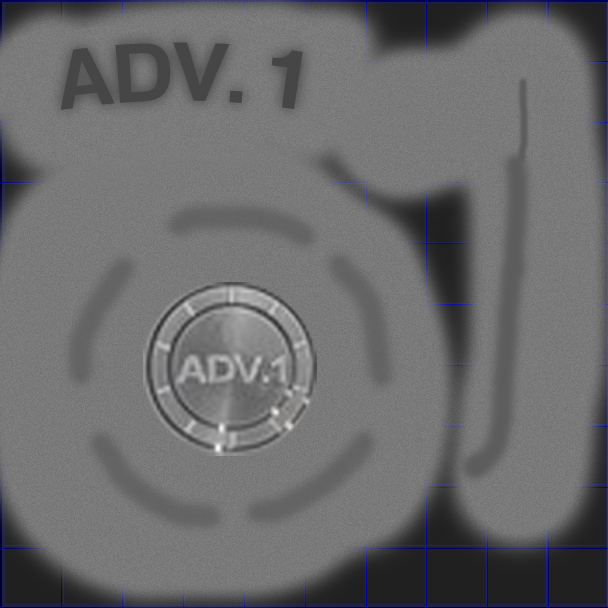
<style>
.page{position:relative;width:608px;height:608px}
.page>*{position:absolute;margin:0}
.t1{font:80.8px "HeldustryFTVBasic-Demi";color:#464646}
</style>
<div class="page">
<p class="t1" style="left:60px;top:42px;width:243px;height:68px">ADV. 1</p>
</div>
